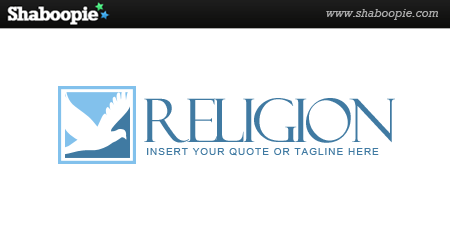
<style>
.page{position:relative;width:450px;height:250px;background:#ffffff}
.page>*{position:absolute;margin:0}
.t1{font:60px "FelixTitlingMT";letter-spacing:-0.075em;color:#407aa2}
.t2{font:10px "ArialMT";letter-spacing:0.1em;color:#407aa2}
</style>
<div class="page">
<p class="t1" style="left:144px;top:98px;width:251px;height:45px">RELIGION</p>
<p class="t2" style="left:147px;top:148px;width:232px;height:8px">INSERT YOUR QUOTE OR TAGLINE HERE</p>
</div>
